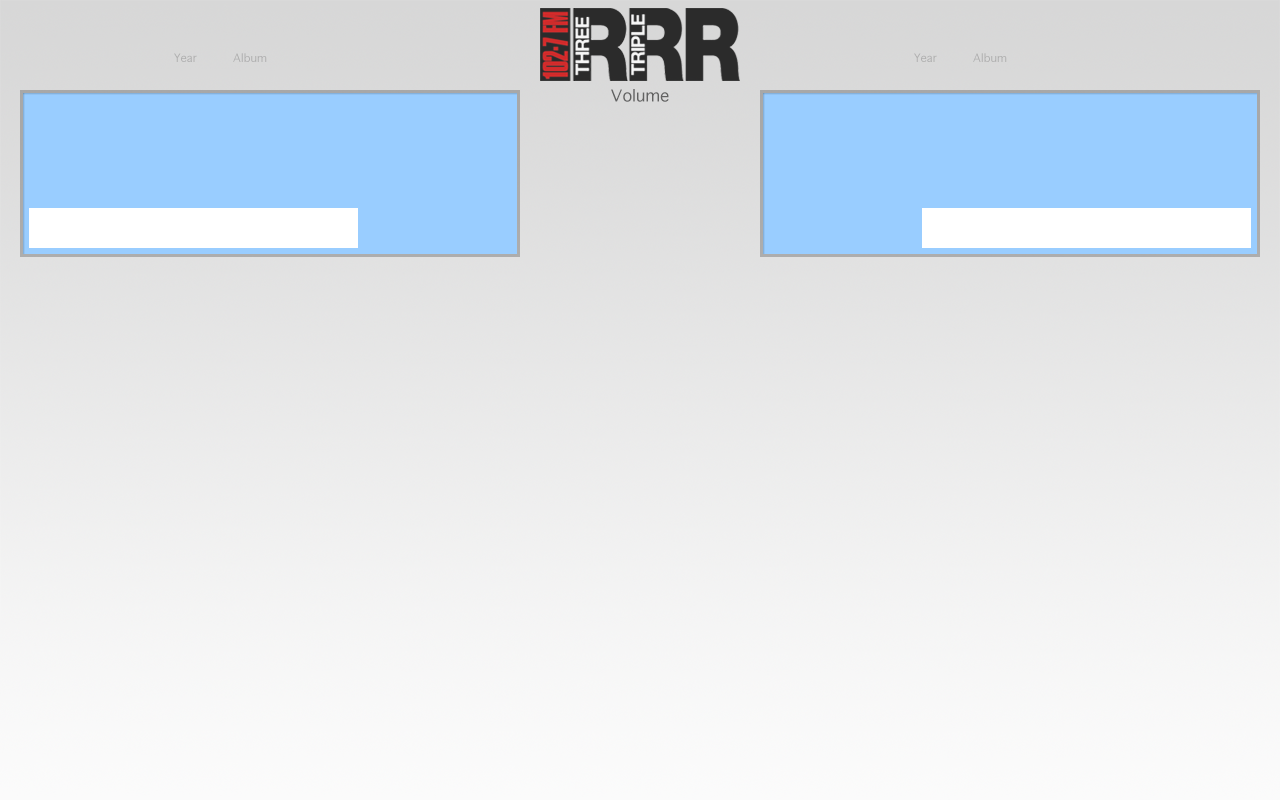
<style>
.page{position:relative;width:1280px;height:800px}
.page>*{position:absolute;margin:0}
.t1{font:11.2px "Geneva";color:#afafb0;scale:0.96 1}
.t2{font:11.2px "Geneva";color:#afafb0}
.t3{font:11.2px "Geneva";color:#afafaf;scale:0.96 1}
.t4{font:11.2px "Geneva";color:#afafaf}
.t5{font:16px "Geneva";color:#626262}
</style>
<div class="page">
<p class="t1" style="left:174px;top:53px;width:23px;height:9px">Year</p>
<p class="t2" style="left:233px;top:53px;width:34px;height:9px">Album</p>
<p class="t3" style="left:914px;top:53px;width:23px;height:9px">Year</p>
<p class="t4" style="left:973px;top:53px;width:34px;height:9px">Album</p>
<p class="t5" style="left:611px;top:89px;width:58px;height:13px">Volume</p>
</div>
